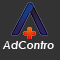
<style>
.page{position:relative;width:60px;height:60px;background:#333333}
.page>*{position:absolute;margin:0}
.t1{font:11px "CenturyGothic-BoldItalic";color:#ffffff}
</style>
<div class="page">
<p class="t1" style="left:2px;top:41px;width:52px;height:8px">AdControl</p>
</div>
